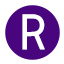
<style>
.page{position:relative;width:64px;height:64px;background:#ffffff}
.page>*{position:absolute;margin:0}
.t1{font:52px "Gidole-Regular";color:#ffffff;font-weight:bold}
</style>
<div class="page">
<p class="t1" style="left:22px;top:14px;width:23px;height:36px">R</p>
</div>
